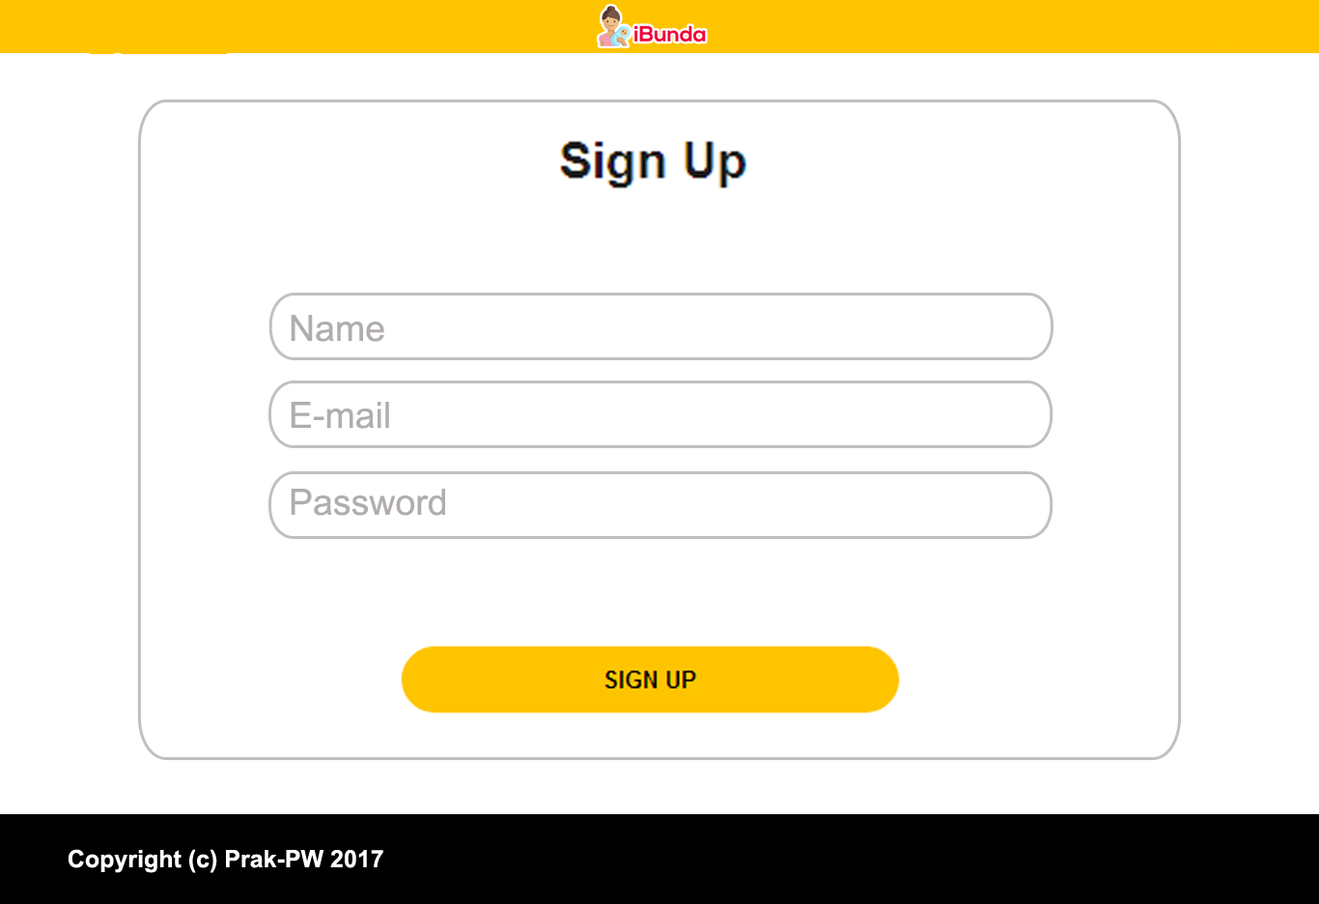
<style>
.page{position:relative;width:1319px;height:904px;background:#ffffff}
.page>*{position:absolute;margin:0}
.t1{font:36.2px "ArialMT";color:#b1adad}
.t2{font:24.1px "Arial-BoldMT";color:#ffffff}
</style>
<div class="page">
<p class="t1" style="left:291px;top:315px;width:154px;height:201px">Name<br><br>E-mail<br><br>Password</p>
<p class="t2" style="left:68px;top:849px;width:315px;height:24px">Copyright (c) Prak-PW 2017</p>
</div>
